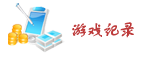
<style>
.page{position:relative;width:142px;height:58px;background:#ffffff}
.page>*{position:absolute;margin:0}
.t1{font:18px "FZSTK--GBK1-0";letter-spacing:-0.14em;color:#bd3a3a;font-weight:bold}
</style>
<div class="page">
<p class="t1" style="left:72px;top:22px;width:62px;height:16px">游戏记录</p>
</div>
